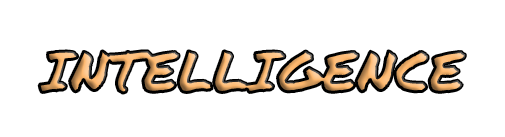
<style>
.page{position:relative;width:505px;height:137px;background:#ffffff}
.page>*{position:absolute;margin:0}
.t1{font:56px "PermanentMarker-Regular"}
</style>
<div class="page">
<p class="t1" style="left:39px;top:51px;width:427px;height:42px">INTELLIGENCE</p>
</div>
